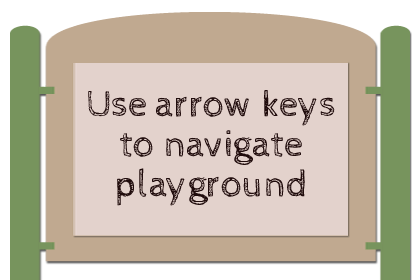
<style>
.page{position:relative;width:420px;height:280px;background:#e3d2cc}
.page>*{position:absolute;margin:0}
.t1{font:38px/40px "CabinSketch-Regular";color:#200c0c}
</style>
<div class="page">
<p class="t1" style="left:88px;top:90px;width:247px;height:116px;text-align:center">Use arrow keys <br>to navigate <br>playground</p>
</div>
